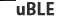
<style>
.page{position:relative;width:59px;height:16px;background:#ffffff}
.page>*{position:absolute;margin:0}
.t1{font:16px "AdobeGothicStd-Bold";color:#303030;font-weight:bold}
</style>
<div class="page">
<p class="t1" style="left:16px;top:2px;width:38px;height:14px">uBLE</p>
</div>
